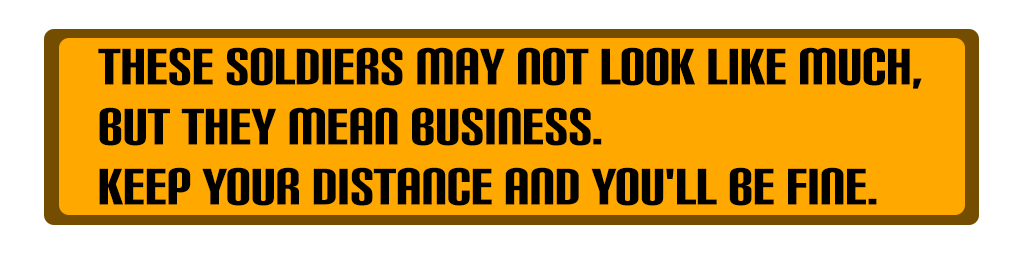
<style>
.page{position:relative;width:1024px;height:256px;background:#ffa800}
.page>*{position:absolute;margin:0}
.t1{font:50px "CarbonBl-Regular";color:#000000}
</style>
<div class="page">
<p class="t1" style="left:98px;top:47px;width:824px;height:159px">These soldiers may not look like much, but they mean business. <br>Keep your distance and you'll be fine.</p>
</div>
